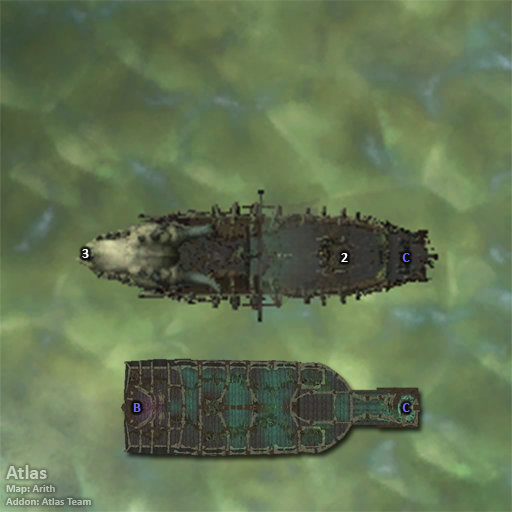
<style>
.page{position:relative;width:512px;height:512px}
.page>*{position:absolute;margin:0}
.t1{font:14px "Calibri-Bold";color:#ffffff}
.t2{font:14px "Calibri-Bold";color:#6666ff}
.t3{font:11px "Calibri-Bold";color:#c2ceba}
.t4{font:20px "Calibri-Bold";color:#c2ceba}
</style>
<div class="page">
<p class="t1" style="left:82px;top:249px;width:7px;height:9px">3</p>
<p class="t1" style="left:341px;top:253px;width:7px;height:9px">2</p>
<p class="t2" style="left:402px;top:253px;width:8px;height:9px">C</p>
<p class="t2" style="left:133px;top:403px;width:8px;height:9px">B</p>
<p class="t2" style="left:402px;top:403px;width:8px;height:9px">C</p>
<p class="t3" style="left:6px;top:465px;width:85px;height:40px"><span class="t4">Atlas<br></span>Map: Arith<br>Addon: Atlas Team</p>
</div>
